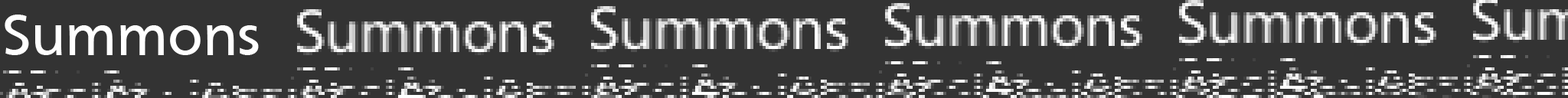
<style>
.page{position:relative;width:1568px;height:98px;background:#333333}
.page>*{position:absolute;margin:0}
.t1{font:60.6px "Frutiger";color:#ffffff}
</style>
<div class="page">
<p class="t1" style="left:5px;top:15px;width:254px;height:40px">Summons</p>
</div>
